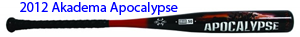
<style>
.page{position:relative;width:300px;height:37px;background:#ffffff}
.page>*{position:absolute;margin:0}
.t1{font:14px "MyriadPro-Regular";color:#0000ff}
</style>
<div class="page">
<p class="t1" style="left:20px;top:2px;width:158px;height:13px">2012 Akadema Apocalypse</p>
</div>
